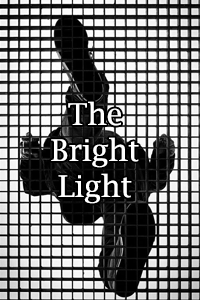
<style>
.page{position:relative;width:200px;height:300px}
.page>*{position:absolute;margin:0}
.t1{font:30px "LucidaBright";color:#ffffff}
</style>
<div class="page">
<p class="t1" style="left:51px;top:101px;width:88px;height:103px;text-align:center">The<br>Bright<br>Light</p>
</div>
